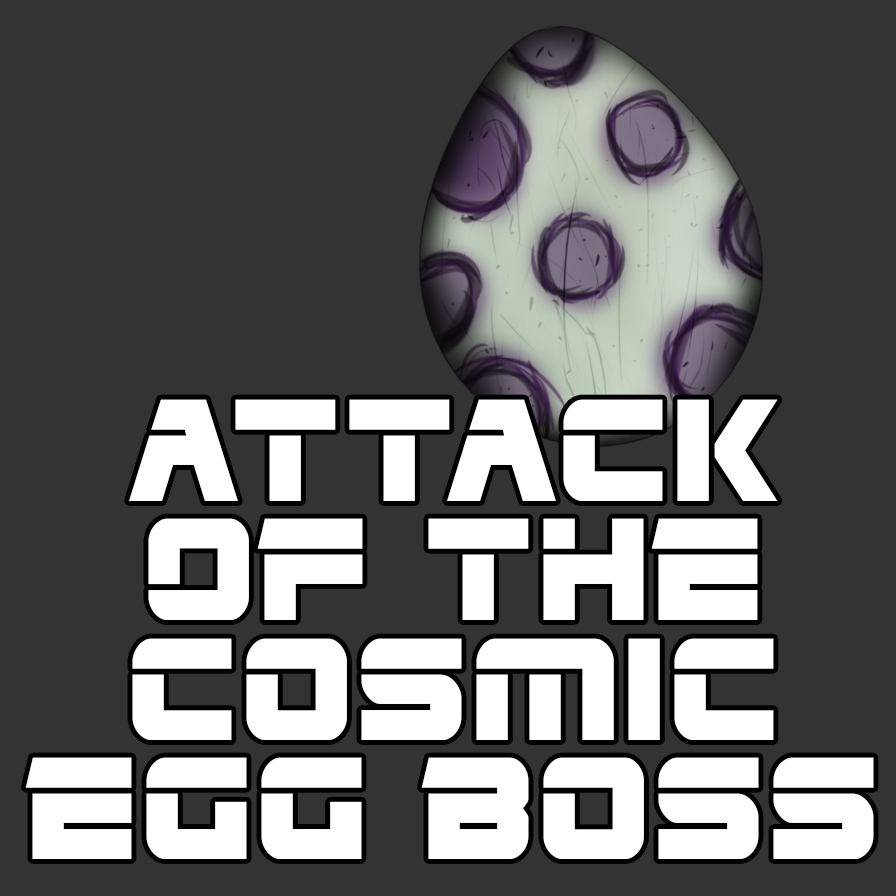
<style>
.page{position:relative;width:896px;height:896px;background:#333333}
.page>*{position:absolute;margin:0}
.t1{font:171.8px/119.3px "EdgeRacer";color:#ffffff}
</style>
<div class="page">
<p class="t1" style="left:25px;top:399px;width:849px;height:460px;text-align:center">ATTACK<br>OF THE<br>Cosmic<br>Egg Boss</p>
</div>
